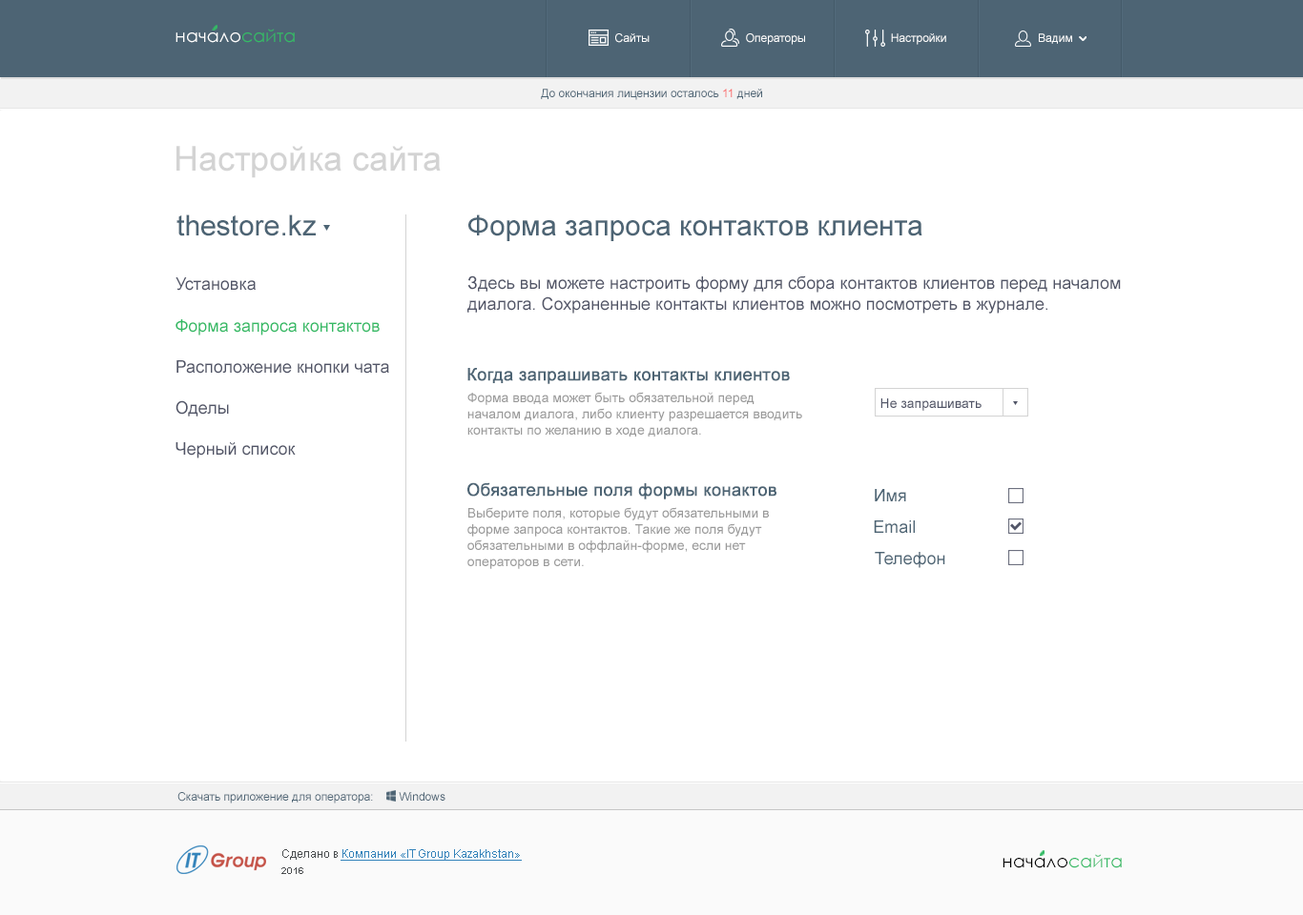
<style>
.page{position:relative;width:1303px;height:915px;background:#ffffff}
.page>*{position:absolute;margin:0}
.t1{font:17.7px "CenturyGothic";color:#ffffff}
.t2{font:17.7px "CenturyGothic";color:#34ba65}
.t3{font:11.4px "ArialMT";color:#ffffff}
.t4{font:11.4px "ArialMT";color:#4d6474}
.t5{font:11.4px "ArialMT";color:#f96969}
.t6{font:34.3px "ArialMT";color:#d3d3d3}
.t7{font:28.6px "ArialMT";color:#4d6474}
.t8{font:17.2px "ArialMT";color:#515567}
.t9{font:17.2px "ArialMT";color:#34ba65}
.t10{font:17.2px "ArialMT";color:#4d6474;font-weight:bold}
.t11{font:13.4px "ArialMT";color:#9a9a9a}
.t12{font:13.4px "ArialMT";color:#515567}
.t13{font:17.2px "ArialMT";color:#4d6474}
.t14{font:11.4px "ArialMT";color:#3483ba;text-decoration:underline}
.t15{font:11.4px "ArialMT";color:#4a4d4f}
.t16{font:17.7px "CenturyGothic";color:#000000}
.t17{font:9.5px "Arial-BoldMT";color:#4a4d4f}
</style>
<div class="page">
<p class="t1" style="left:175px;top:29px;width:120px;height:14px">начало<span class="t2">сайта</span></p>
<p class="t3" style="left:615px;top:33px;width:34px;height:10px">Сайты</p>
<p class="t3" style="left:746px;top:33px;width:59px;height:12px">Операторы</p>
<p class="t3" style="left:891px;top:33px;width:55px;height:12px">Настройки</p>
<p class="t3" style="left:1038px;top:33px;width:34px;height:11px">Вадим</p>
<p class="t4" style="left:541px;top:89px;width:221px;height:11px">До окончания лицензии осталось <span class="t5">11</span> дней</p>
<p class="t6" style="left:176px;top:146px;width:265px;height:32px">Настройка сайта</p>
<p class="t7" style="left:176px;top:215px;width:140px;height:21px">thestore.kz</p>
<p class="t7" style="left:468px;top:215px;width:454px;height:26px">Форма запроса контактов клиента</p>
<p class="t8" style="left:175px;top:277px;width:214px;height:182px">Установка<br><br><span class="t9">Форма запроса контактов<br></span><br>Расположение кнопки чата<br><br>Оделы<br><br>Черный список</p>
<p class="t8" style="left:467px;top:276px;width:653px;height:38px">Здесь вы можете настроить форму для сбора контактов клиентов перед началом <br>диалога. Сохраненные контакты клиентов можно посмотреть в журнале.</p>
<p class="t10" style="left:467px;top:368px;width:323px;height:16px">Когда запрашивать контакты клиентов</p>
<p class="t11" style="left:467px;top:392px;width:335px;height:45px">Форма ввода может быть обязательной перед <br>началом диалога, либо клиенту разрешается вводить<br>контакты по желанию в ходе диалога.</p>
<p class="t12" style="left:880px;top:399px;width:101px;height:12px">Не запрашивать</p>
<p class="t10" style="left:467px;top:483px;width:309px;height:17px">Обязательные поля формы конактов</p>
<p class="t13" style="left:874px;top:489px;width:32px;height:13px">Имя</p>
<p class="t11" style="left:467px;top:507px;width:302px;height:62px">Выберите поля, которые будут обязательными в <br>форме запроса контактов. Такие же поля будут <br>обязательными в оффлайн-форме, если нет <br>операторов в сети.</p>
<p class="t13" style="left:873px;top:521px;width:41px;height:13px">Email</p>
<p class="t13" style="left:874px;top:552px;width:71px;height:16px">Телефон</p>
<p class="t4" style="left:177px;top:792px;width:268px;height:12px">Скачать приложение для оператора:        Windows</p>
<p class="t14" style="left:282px;top:850px;width:240px;height:11px"><span class="t15">Сделано в </span>Компании «IT Group Kazakhstan»</p>
<p class="t16" style="left:1002px;top:854px;width:119px;height:15px">начало<span class="t2">сайта</span></p>
<p class="t17" style="left:281px;top:868px;width:22px;height:6px">2016</p>
</div>
